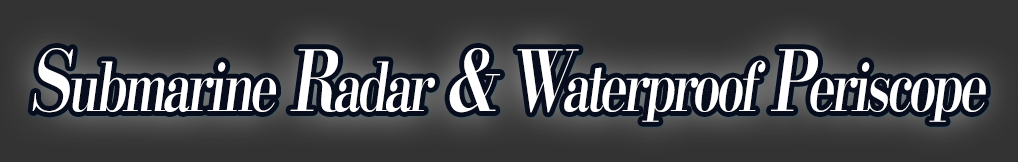
<style>
.page{position:relative;width:1018px;height:162px;background:#333333}
.page>*{position:absolute;margin:0}
.t1{font:67.2px "KochoStd-Heavy";letter-spacing:-0.07em;color:#ffffff;font-style:italic;scale:0.75 1}
.t2{font:84px "KochoStd-Heavy";letter-spacing:-0.07em;color:#ffffff;font-style:italic;scale:0.75 1}
</style>
<div class="page">
<p class="t1" style="left:32px;top:48px;width:954px;height:74px"><span class="t2">S</span>ubmarine<span class="t2"> R</span>adar<span class="t2"> &amp; W</span>aterproof<span class="t2"> P</span>eriscope</p>
</div>
